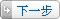
<style>
.page{position:relative;width:60px;height:19px}
.page>*{position:absolute;margin:0}
.t1{font:12px "SimSun";color:#1d5784}
</style>
<div class="page">
<p class="t1" style="left:17px;top:5px;width:35px;height:11px">下一步</p>
</div>
